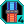
<style>
.page{position:relative;width:24px;height:24px}
.page>*{position:absolute;margin:0}
.t1{font:9px "Montserrat-Bold";color:#000000}
</style>
<div class="page">
<p class="t1" style="left:18px;top:16px;width:6px;height:7px">4</p>
</div>
